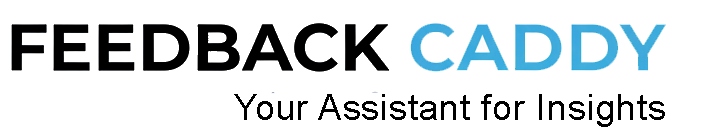
<style>
.page{position:relative;width:702px;height:136px;background:#ffffff}
.page>*{position:absolute;margin:0}
.t1{font:35.6px "ArialMT";letter-spacing:0.025em;color:#000000}
</style>
<div class="page">
<p class="t1" style="left:234px;top:94px;width:431px;height:33px">Your Assistant for Insights</p>
</div>
